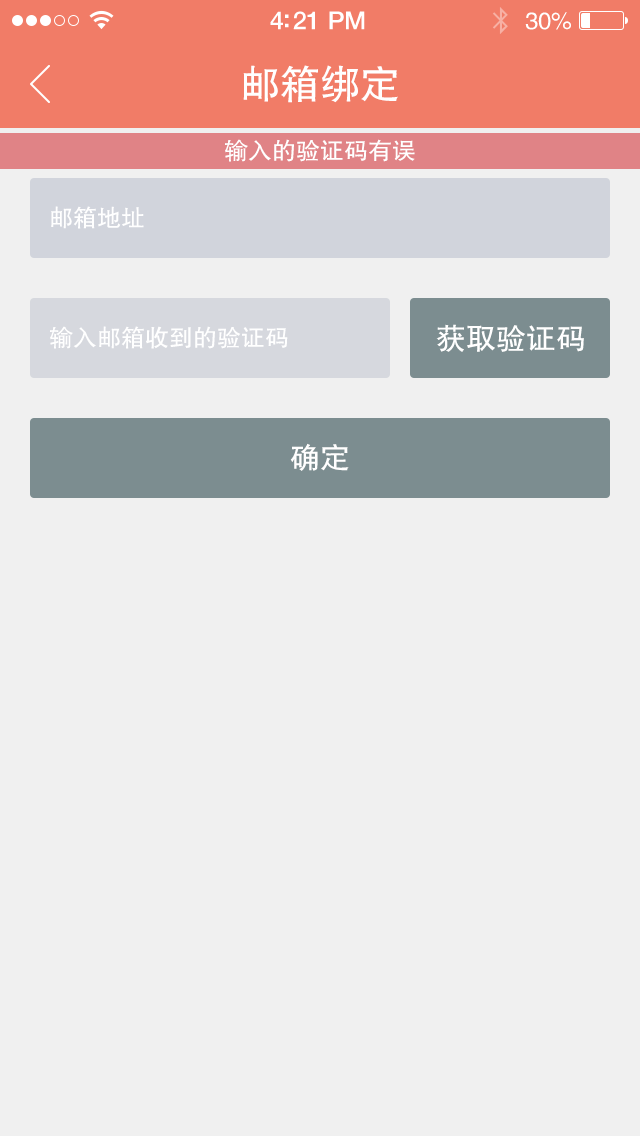
<style>
.page{position:relative;width:640px;height:1136px;background:#f0f0f0}
.page>*{position:absolute;margin:0}
.t1{font:25px "HelveticaNeue-Medium";letter-spacing:-0.02em;color:#ffffff}
.t2{font:24px "FZHTJW--GB1-0";letter-spacing:-0.02em;color:#ffffff}
.t3{font:40px "FZHTJW--GB1-0";color:#ffffff}
.t4{font:24px "FZHTJW--GB1-0";color:#ffffff}
.t5{font:30px "FZHTJW--GB1-0";color:#ffffff}
</style>
<div class="page">
<p class="t1" style="left:270px;top:11px;width:95px;height:19px">4:21 PM</p>
<p class="t2" style="left:525px;top:12px;width:46px;height:18px">30%</p>
<p class="t3" style="left:243px;top:65px;width:155px;height:38px">邮箱绑定</p>
<p class="t4" style="left:225px;top:139px;width:190px;height:23px">输入的验证码有误</p>
<p class="t4" style="left:51px;top:206px;width:93px;height:23px">邮箱地址</p>
<p class="t4" style="left:50px;top:326px;width:238px;height:23px">输入邮箱收到的验证码</p>
<p class="t5" style="left:436px;top:324px;width:148px;height:28px">获取验证码</p>
<p class="t5" style="left:290px;top:443px;width:59px;height:28px">确定</p>
</div>
